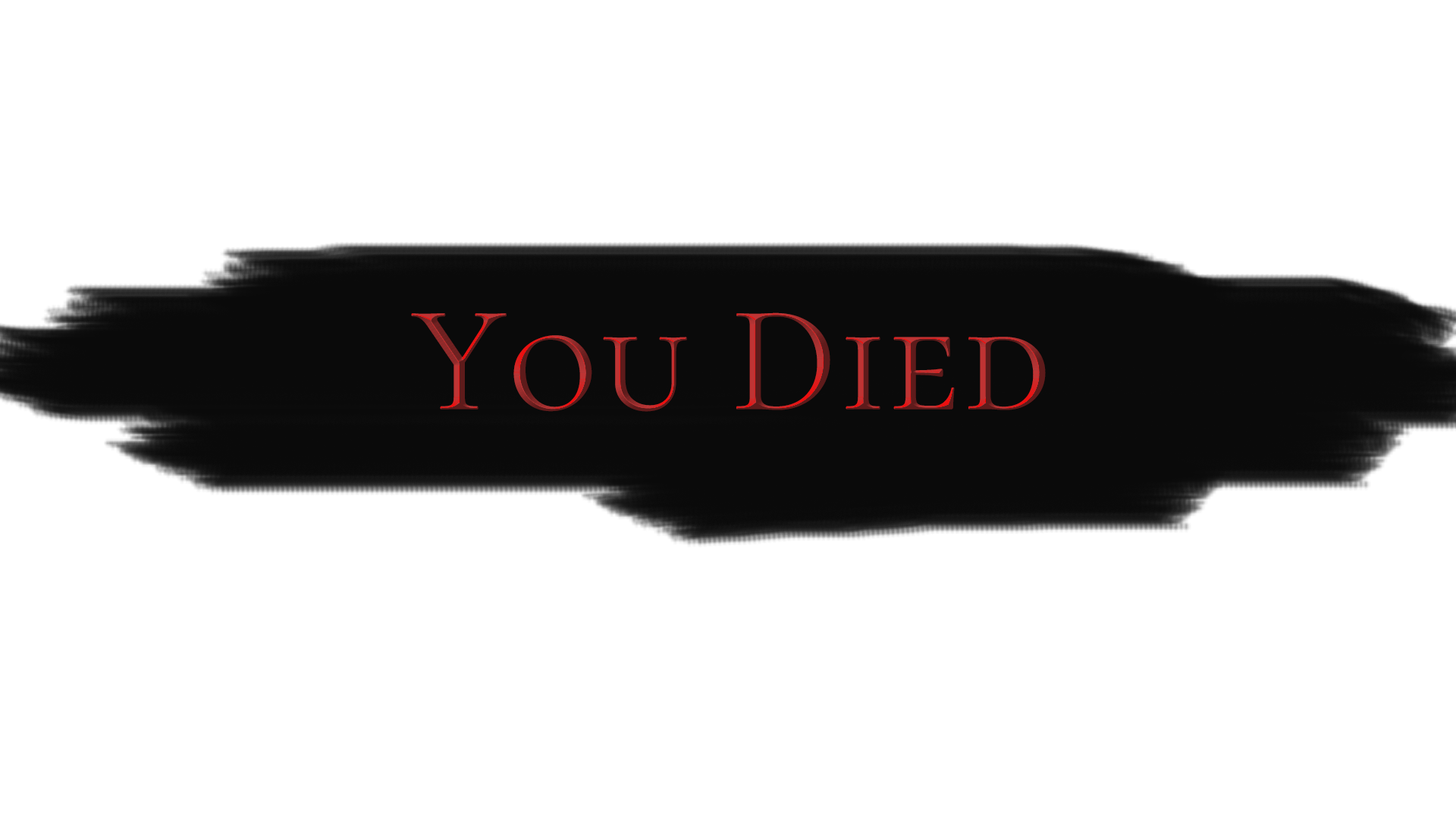
<style>
.page{position:relative;width:1456px;height:819px;background:#ffffff}
.page>*{position:absolute;margin:0}
.t1{font:151.7px "CormorantSC-Regular";font-weight:bold}
</style>
<div class="page">
<p class="t1" style="left:411px;top:312px;width:635px;height:100px">You Died</p>
</div>
